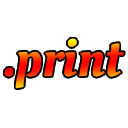
<style>
.page{position:relative;width:128px;height:128px;background:#ffffff}
.page>*{position:absolute;margin:0}
.t1{font:55px "OleoScript-Regular"}
</style>
<div class="page">
<p class="t1" style="left:4px;top:38px;width:120px;height:51px">.print</p>
</div>
